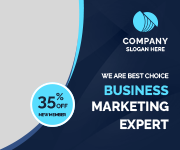
<style>
.page{position:relative;width:180px;height:150px;background:#d7d7d7}
.page>*{position:absolute;margin:0}
.t1{font:8.6px "Raleway-Bold";letter-spacing:0.05em;color:#ffffff}
.t2{font:5.1px "Raleway-Medium";letter-spacing:0.05em;color:#ffffff}
.t3{font:6.4px "Raleway-Medium";color:#ffffff}
.t4{font:13.2px "Raleway-ExtraBold";color:#58ddfe}
.t5{font:16.8px "Raleway-Bold";color:#192437}
.t6{font:13.2px "Raleway-ExtraBold";color:#ffffff}
.t7{font:3.9px "Raleway-Medium";color:#192437}
.t8{font:5.8px "Raleway-Medium";color:#192437}
</style>
<div class="page">
<p class="t1" style="left:122px;top:37px;width:46px;height:8px">COMPANY</p>
<p class="t2" style="left:126px;top:47px;width:39px;height:5px">SLOGAN HERE</p>
<p class="t3" style="left:101px;top:73px;width:68px;height:6px">WE ARE BEST CHOICE</p>
<p class="t4" style="left:104px;top:85px;width:65px;height:11px">BUSINESS</p>
<p class="t5" style="left:38px;top:92px;width:26px;height:17px">35%</p>
<p class="t6" style="left:92px;top:101px;width:77px;height:11px">MARKETING</p>
<p class="t7" style="left:38px;top:113px;width:28px;height:4px">NEW MEMBER</p>
<p class="t8" style="left:56px;top:103px;width:12px;height:6px">OFF</p>
<p class="t6" style="left:120px;top:119px;width:49px;height:11px">EXPERT</p>
</div>
